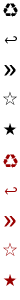
<style>
.page{position:relative;width:20px;height:300px;background:#ffffff}
.page>*{position:absolute;margin:0}
.t1{font:20px "AppleSymbols";color:#000000}
.t2{font:22px "AppleSymbols";color:#000000}
.t3{font:35px "AppleSymbols";color:#000000}
.t4{font:20px "AppleSymbols"}
.t5{font:20px "AppleSymbols";color:#990000}
.t6{font:22px "AppleSymbols";color:#990000}
.t7{font:35px "AppleSymbols";color:#990000}
</style>
<div class="page">
<p class="t1" style="left:3px;top:3px;width:15px;height:14px">♻</p>
<p class="t2" style="left:4px;top:36px;width:13px;height:8px">↩</p>
<p class="t3" style="left:4px;top:65px;width:12px;height:11px">»</p>
<p class="t4" style="left:3px;top:91px;width:14px;height:14px">☆</p>
<p class="t2" style="left:3px;top:123px;width:14px;height:12px">★</p>
<p class="t5" style="left:3px;top:154px;width:15px;height:14px">♻</p>
<p class="t6" style="left:4px;top:187px;width:13px;height:8px">↩</p>
<p class="t7" style="left:4px;top:216px;width:12px;height:11px">»</p>
<p class="t4" style="left:3px;top:242px;width:14px;height:14px">☆</p>
<p class="t6" style="left:3px;top:274px;width:14px;height:12px">★</p>
</div>
